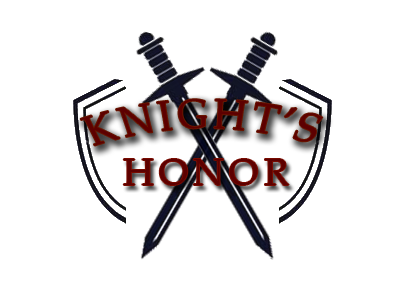
<style>
.page{position:relative;width:400px;height:300px;background:#ffffff}
.page>*{position:absolute;margin:0}
.t1{font:38.9px "BookAntiqua";letter-spacing:0.14em;color:#5d0000}
.t2{font:37.1px "BookAntiqua";letter-spacing:0.14em;color:#5d0000}
</style>
<div class="page">
<p class="t1" style="left:80px;top:99px;width:243px;height:47px">KNIGHT’S</p>
<p class="t2" style="left:123px;top:159px;width:166px;height:26px">HONOR</p>
</div>
